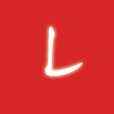
<style>
.page{position:relative;width:114px;height:114px;background:#d62629}
.page>*{position:absolute;margin:0}
.t1{font:70px "SketchFlowPrint";color:#ffffff}
</style>
<div class="page">
<p class="t1" style="left:45px;top:26px;width:38px;height:50px">L</p>
</div>
